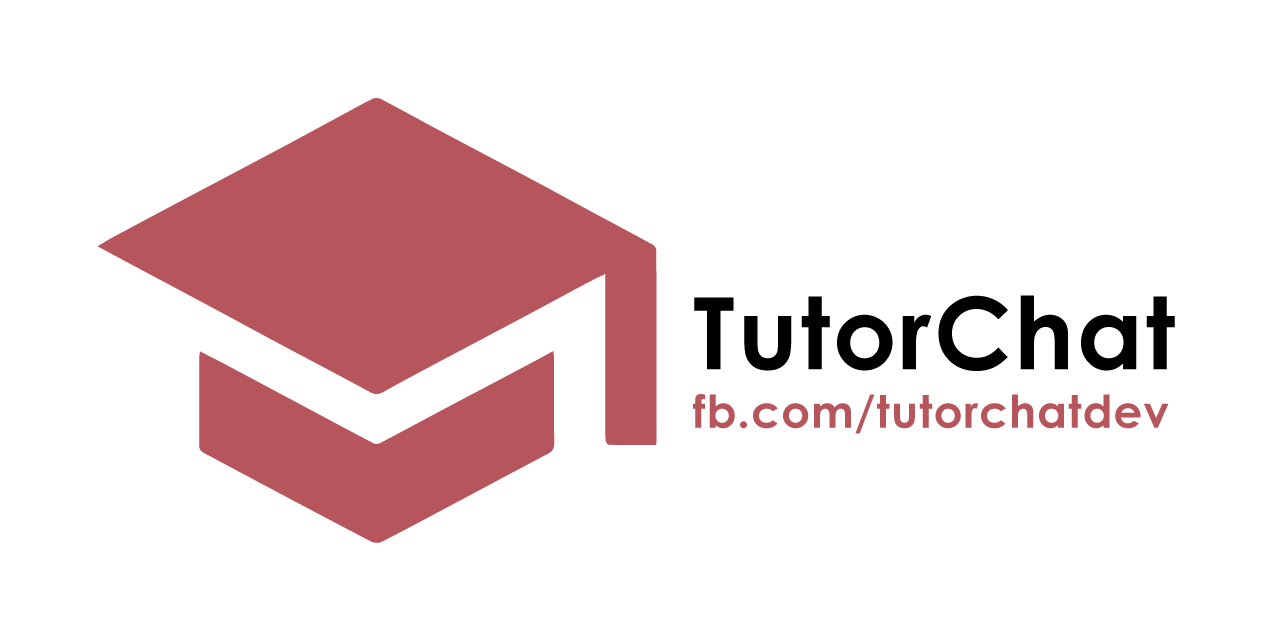
<style>
.page{position:relative;width:1280px;height:640px;background:#ffffff}
.page>*{position:absolute;margin:0}
.t1{font:100px "CenturyGothic-Bold";letter-spacing:0.025em;color:#000000}
.t2{font:45px "CenturyGothic-Bold";letter-spacing:0.025em;color:#b6555c}
</style>
<div class="page">
<p class="t1" style="left:694px;top:295px;width:481px;height:76px">TutorChat</p>
<p class="t2" style="left:693px;top:394px;width:476px;height:40px">fb.com/tutorchatdev</p>
</div>
